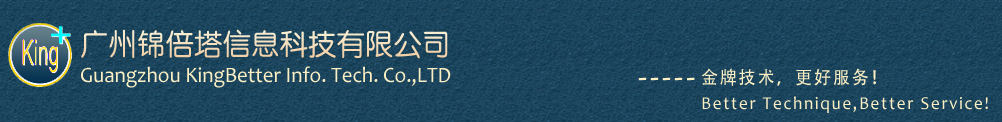
<style>
.page{position:relative;width:1002px;height:122px}
.page>*{position:absolute;margin:0}
.t1{font:30px "ç»å¸ä¸­åç®-regular";color:#faeec3;scale:0.95 1}
.t2{font:22px "Candara";color:#faeec3;scale:0.95 1}
.t3{font:36px "Candara";letter-spacing:0.1em;color:#faeec3;scale:0.95 1}
.t4{font:18px/26.1px "Candara";letter-spacing:0.1em;color:#faeec3;scale:0.95 1}
.t5{font:18px/26.1px "AdobeHeitiStd-Regular";letter-spacing:0.1em;color:#faeec3;scale:0.95 1}
</style>
<div class="page">
<p class="t1" style="left:81px;top:29px;width:367px;height:30px">广州锦倍塔信息科技有限公司</p>
<p class="t2" style="left:81px;top:66px;width:370px;height:22px">Guangzhou KingBetter Info. Tech. Co.,LTD</p>
<p class="t3" style="left:638px;top:77px;width:57px;height:4px">-----</p>
<p class="t4" style="left:701px;top:68px;width:287px;height:45px"><span class="t5">金牌技术，更好服务！<br></span>Better Technique,Better Service!</p>
</div>
